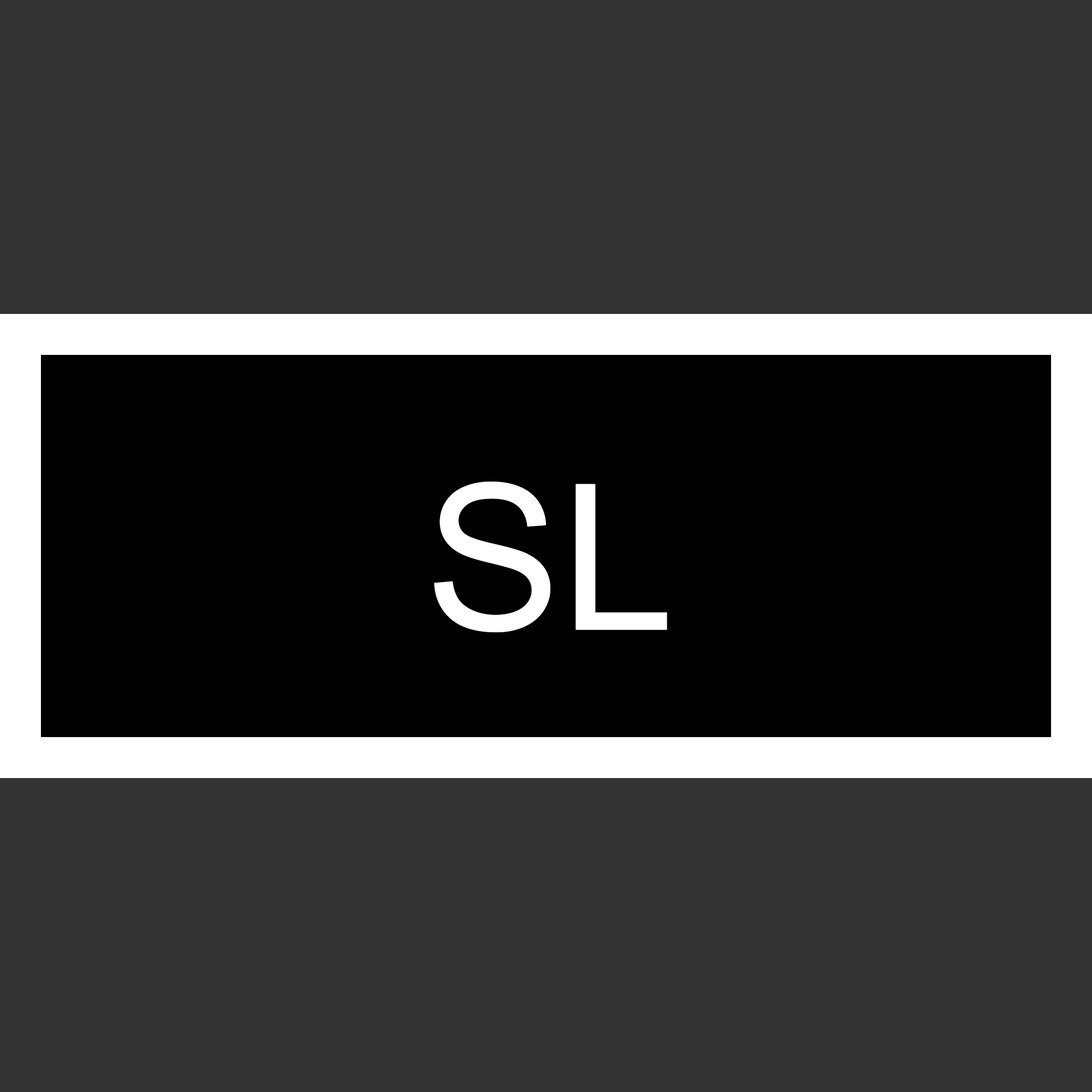
<style>
.page{position:relative;width:1092px;height:1092px;background:#333333}
.page>*{position:absolute;margin:0}
.t1{font:203.5px "ArialMT";color:#ffffff}
</style>
<div class="page">
<p class="t1" style="left:434px;top:482px;width:233px;height:150px">SL</p>
</div>
